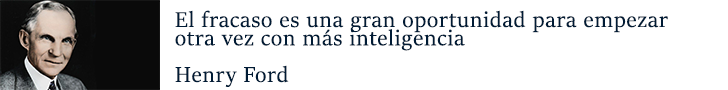
<style>
.page{position:relative;width:728px;height:90px;background:#ffffff}
.page>*{position:absolute;margin:0}
.t1{font:24px/18.3px "SitkaBanner";letter-spacing:0.04em;color:#001b35}
</style>
<div class="page">
<p class="t1" style="left:175px;top:10px;width:493px;height:77px;text-align:justify">El fracaso es una gran oportunidad para empezar <br>otra vez con más inteligencia<br><br>Henry Ford</p>
</div>
